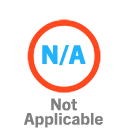
<style>
.page{position:relative;width:128px;height:128px;background:#ffffff}
.page>*{position:absolute;margin:0}
.t1{font:24.7px "TradeGothicNextLTPro-BdCn";color:#21b2fe;font-weight:bold;scale:1.3 1}
.t2{font:16px/14.4px "TradeGothicNextLTPro-BdCn";color:#808080;scale:1.3 1}
</style>
<div class="page">
<p class="t1" style="left:42px;top:45px;width:44px;height:21px">N/A</p>
<p class="t2" style="left:24px;top:98px;width:79px;height:30px;text-align:center">Not<br>Applicable</p>
</div>
